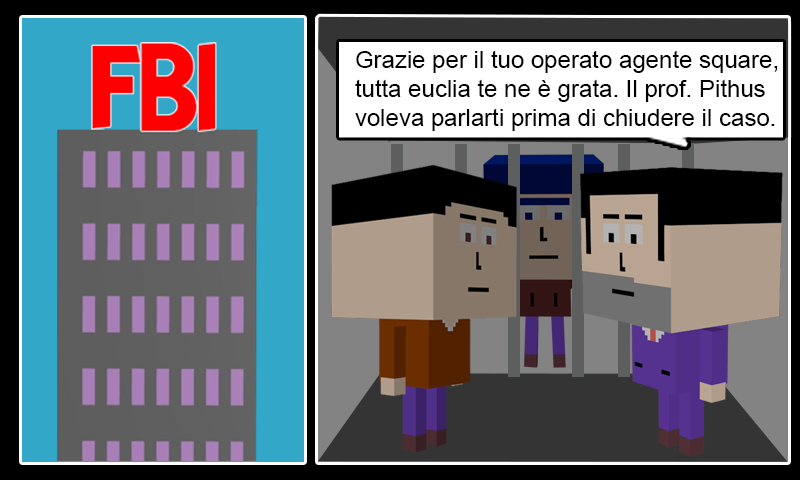
<style>
.page{position:relative;width:800px;height:480px}
.page>*{position:absolute;margin:0}
.t1{font:24px "ArialMT";color:#000000}
</style>
<div class="page">
<p class="t1" style="left:355px;top:50px;width:423px;height:81px">Grazie per il tuo operato agente square,<br>tutta euclia te ne è grata. Il prof. Pithus<br>voleva parlarti prima di chiudere il caso.</p>
</div>
